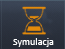
<style>
.page{position:relative;width:65px;height:49px}
.page>*{position:absolute;margin:0}
.t1{font:10px "Calibri";color:#ffffff}
</style>
<div class="page">
<p class="t1" style="left:13px;top:38px;width:41px;height:9px">Symulacja</p>
</div>
